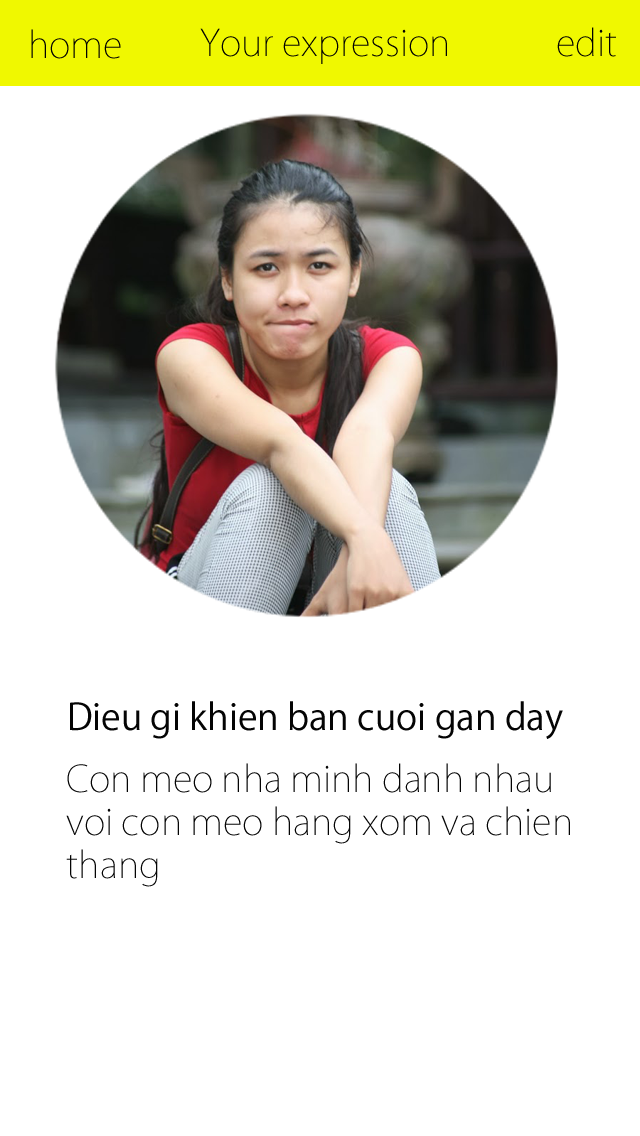
<style>
.page{position:relative;width:640px;height:1136px;background:#ffffff}
.page>*{position:absolute;margin:0}
.t1{font:36px "KozGoPro-ExtraLight";color:#020202}
.t2{font:36px "KozGoPro-ExtraLight";color:#010101}
.t3{font:36px "KozGoPro-Regular";color:#040404}
.t4{font:36px "KozGoPro-ExtraLight";color:#040404}
</style>
<div class="page">
<p class="t1" style="left:31px;top:29px;width:90px;height:30px">home</p>
<p class="t2" style="left:200px;top:28px;width:247px;height:36px">Your expression</p>
<p class="t2" style="left:557px;top:27px;width:59px;height:30px">edit</p>
<p class="t3" style="left:70px;top:701px;width:493px;height:38px">Dieu gi khien ban cuoi gan day</p>
<p class="t4" style="left:66px;top:763px;width:504px;height:124px">Con meo nha minh danh nhau <br>voi con meo hang xom va chien <br>thang</p>
</div>
